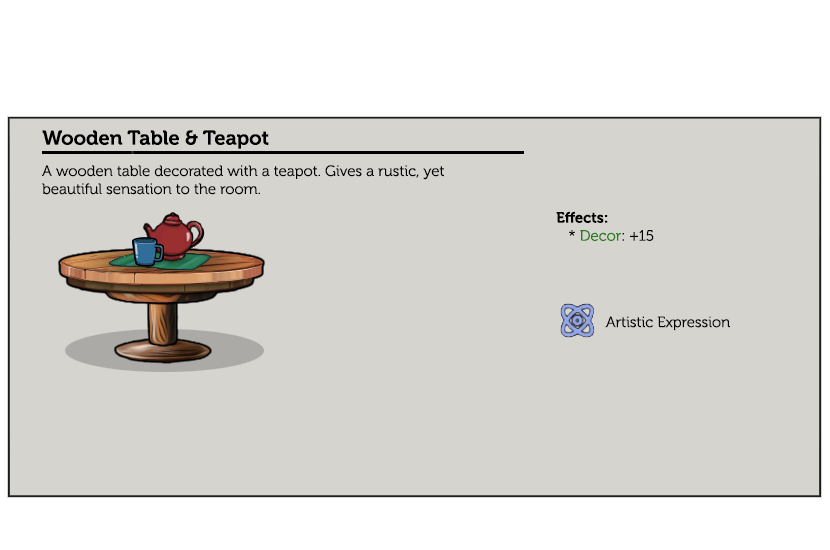
<style>
.page{position:relative;width:830px;height:550px;background:#d6d4cf}
.page>*{position:absolute;margin:0}
.t1{font:20px "Museo-700";color:#000000}
.t2{font:15px "Museo-300";color:#000000}
.t3{font:15px "Museo-700";color:#000000}
.t4{font:15px "Museo-300";color:#247d1a}
.t5{font:15px "Museo-300";color:#020202}
</style>
<div class="page">
<p class="t1" style="left:42px;top:130px;width:227px;height:19px">Wooden Table &amp; Teapot</p>
<p class="t2" style="left:42px;top:165px;width:402px;height:30px">A wooden table decorated with a teapot. Gives a rustic, yet beautiful sensation to the room.</p>
<p class="t3" style="left:556px;top:211px;width:98px;height:30px">Effects:<br><span class="t2">   * </span><span class="t4">Decor</span><span class="t2">: +15</span></p>
<p class="t5" style="left:605px;top:316px;width:125px;height:15px">Artistic Expression</p>
</div>
